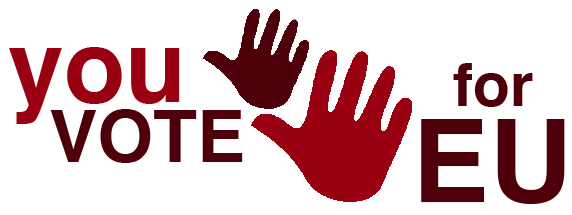
<style>
.page{position:relative;width:572px;height:215px;background:#ffffff}
.page>*{position:absolute;margin:0}
.t1{font:100px "Helvetica-Bold";color:#990012}
.t2{font:60px "Helvetica-Bold";color:#4d0009}
.t3{font:72px "Helvetica-Bold";color:#4d0009}
.t4{font:115px "Helvetica-Bold";color:#4d0009}
</style>
<div class="page">
<p class="t1" style="left:9px;top:47px;width:171px;height:77px">you</p>
<p class="t2" style="left:453px;top:63px;width:80px;height:44px">for</p>
<p class="t3" style="left:50px;top:109px;width:193px;height:54px">VOTE</p>
<p class="t4" style="left:421px;top:119px;width:144px;height:85px">EU</p>
</div>
